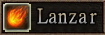
<style>
.page{position:relative;width:105px;height:35px}
.page>*{position:absolute;margin:0}
.t1{font:20px "Ming-Lt-HKSCS-ExtB"}
</style>
<div class="page">
<p class="t1" style="left:37px;top:8px;width:60px;height:16px">Lanzar</p>
</div>
